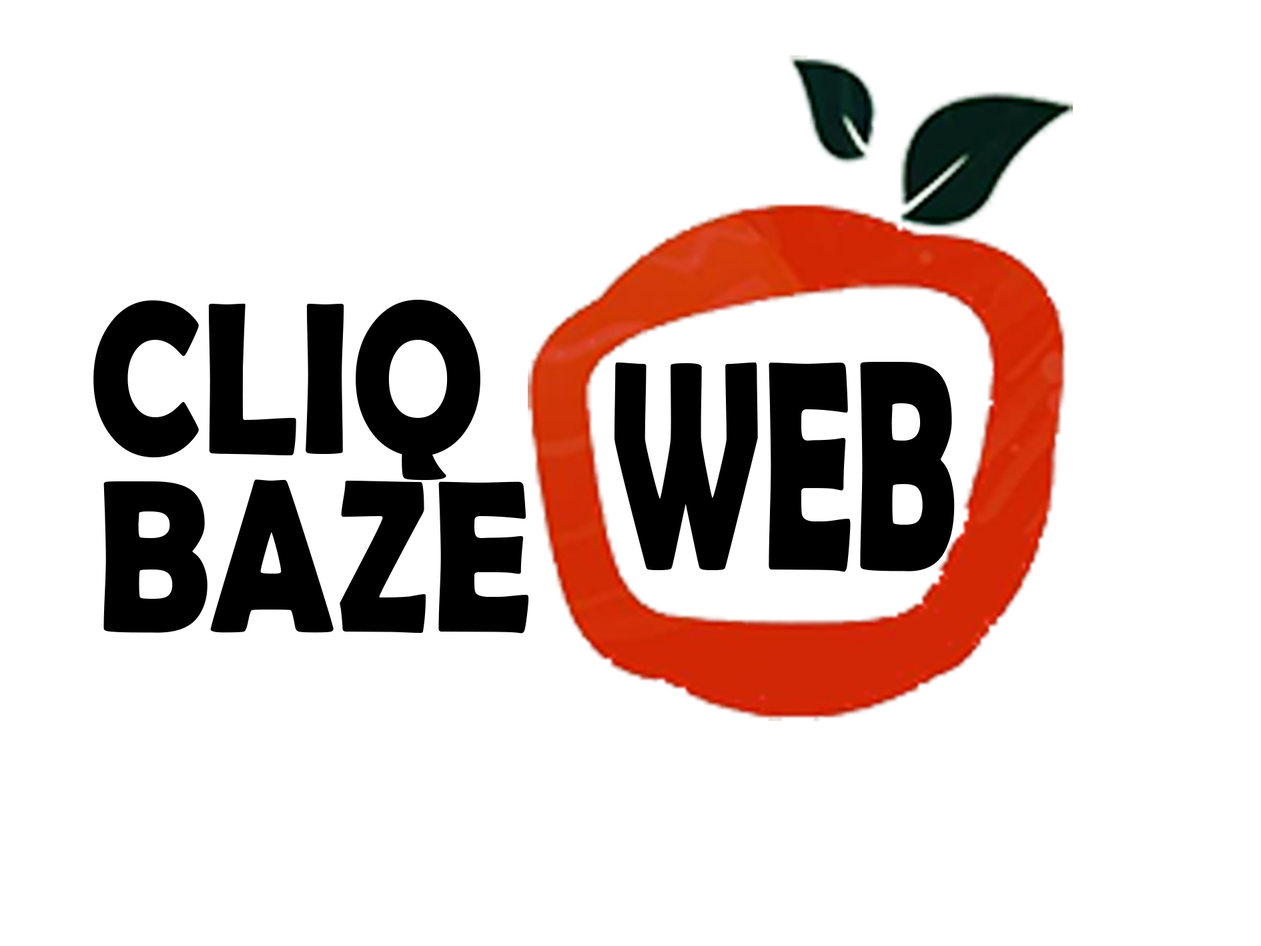
<style>
.page{position:relative;width:1261px;height:946px;background:#ffffff}
.page>*{position:absolute;margin:0}
.t1{font:218.3px "BerlinSansFBDemi-Bold";color:#000000;scale:0.82 1}
.t2{font:301.8px "BerlinSansFBDemi-Bold";color:#000000;scale:0.54 1}
</style>
<div class="page">
<p class="t1" style="left:93px;top:300px;width:387px;height:180px">CLIQ</p>
<p class="t2" style="left:614px;top:362px;width:341px;height:210px">WEB</p>
<p class="t1" style="left:103px;top:479px;width:426px;height:154px">BAZE</p>
</div>
